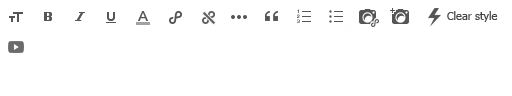
<style>
.page{position:relative;width:512px;height:96px;background:#ffffff}
.page>*{position:absolute;margin:0}
.t1{font:11px "Tahoma";color:#333333}
</style>
<div class="page">
<p class="t1" style="left:447px;top:11px;width:51px;height:11px">Clear style</p>
</div>
